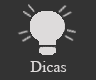
<style>
.page{position:relative;width:96px;height:80px;background:#333333}
.page>*{position:absolute;margin:0}
.t1{font:24px "AngsanaUPC";color:#dddada}
</style>
<div class="page">
<p class="t1" style="left:30px;top:61px;width:37px;height:11px">Dicas</p>
</div>
